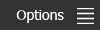
<style>
.page{position:relative;width:100px;height:30px;background:#333333}
.page>*{position:absolute;margin:0}
.t1{font:14px "Tahoma";color:#ffffff}
</style>
<div class="page">
<p class="t1" style="left:16px;top:10px;width:48px;height:13px">Options</p>
</div>
